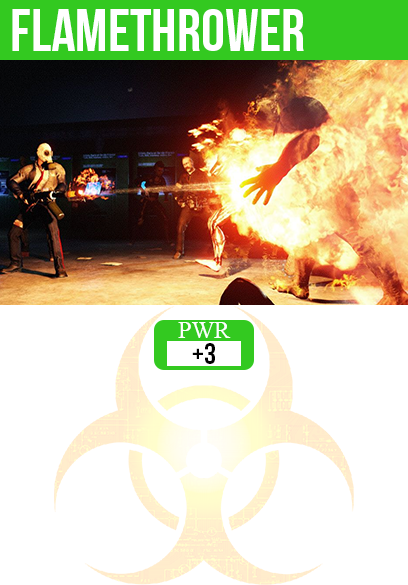
<style>
.page{position:relative;width:408px;height:585px;background:#ffffff}
.page>*{position:absolute;margin:0}
.t1{font:60px "BebasNeue";color:#ffffff}
.t2{font:24px "TimesNewRomanPSMT";color:#ffffff}
.t3{font:30px "BebasNeue";color:#000000}
</style>
<div class="page">
<p class="t1" style="left:12px;top:9px;width:292px;height:42px">flamethrower</p>
<p class="t2" style="left:178px;top:322px;width:53px;height:16px">PWR</p>
<p class="t3" style="left:192px;top:343px;width:23px;height:21px">+3</p>
</div>
